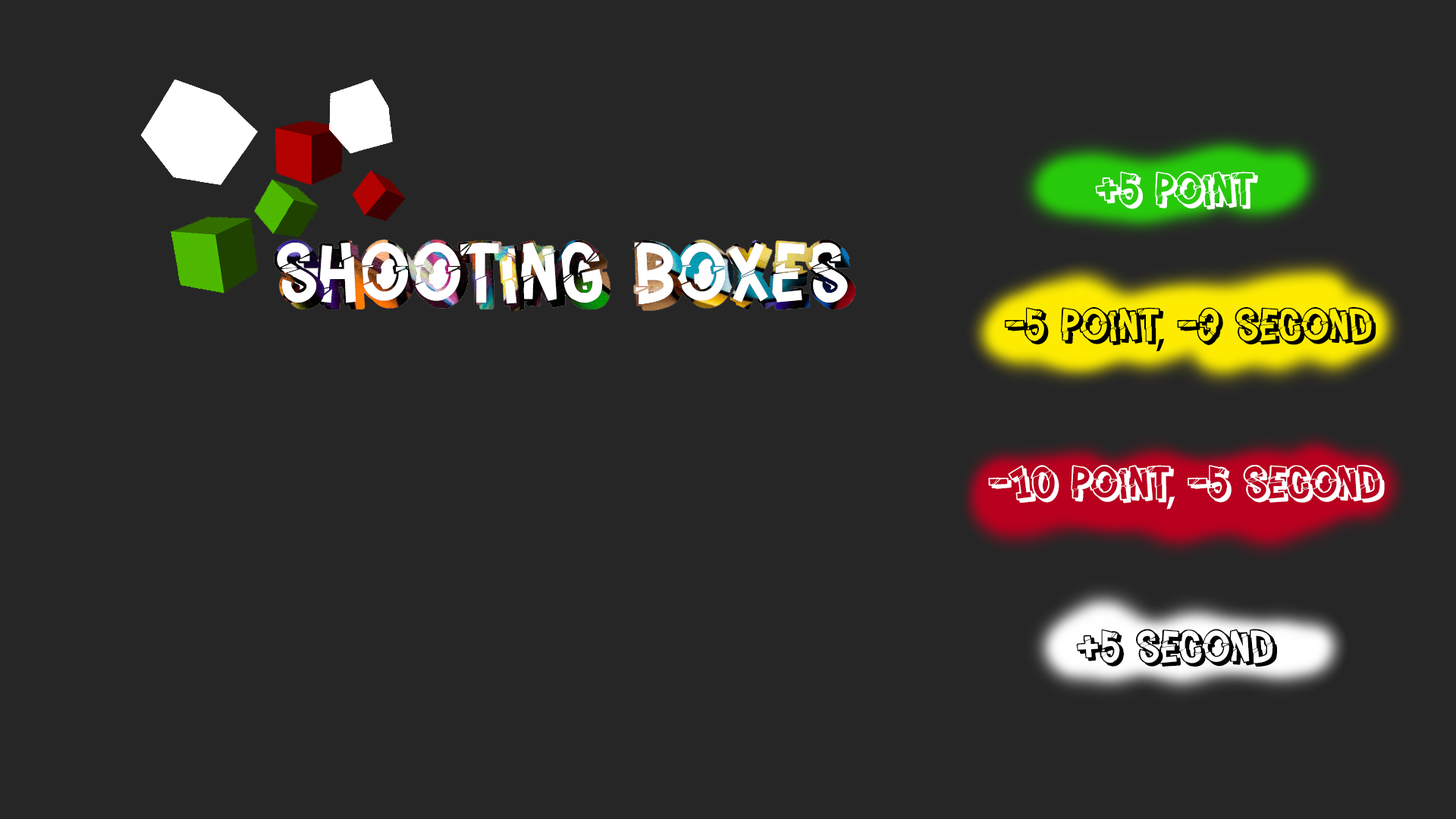
<style>
.page{position:relative;width:1456px;height:819px;background:#262626}
.page>*{position:absolute;margin:0}
.t1{font:50.6px "PeintureFraiche";color:#ffffff}
.t2{font:50.6px "PeintureFraiche";color:#000000}
.t3{font:50.6px "MyriadPro-Regular";color:#000000}
.t4{font:50.6px "MyriadPro-Regular";color:#ffffff}
</style>
<div class="page">
<p class="t1" style="left:1095px;top:171px;width:163px;height:39px">+5 point</p>
<p class="t2" style="left:1004px;top:307px;width:372px;height:45px">-5 point<span class="t3">, </span>-3 second</p>
<p class="t1" style="left:988px;top:465px;width:397px;height:45px">-10 point<span class="t4">, </span>-5 second</p>
<p class="t2" style="left:1076px;top:629px;width:201px;height:38px">+5 second</p>
</div>
